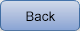
<style>
.page{position:relative;width:80px;height:31px}
.page>*{position:absolute;margin:0}
.t1{font:13.3px "ArialMT";color:#000000}
</style>
<div class="page">
<p class="t1" style="left:26px;top:11px;width:30px;height:10px">Back</p>
</div>
